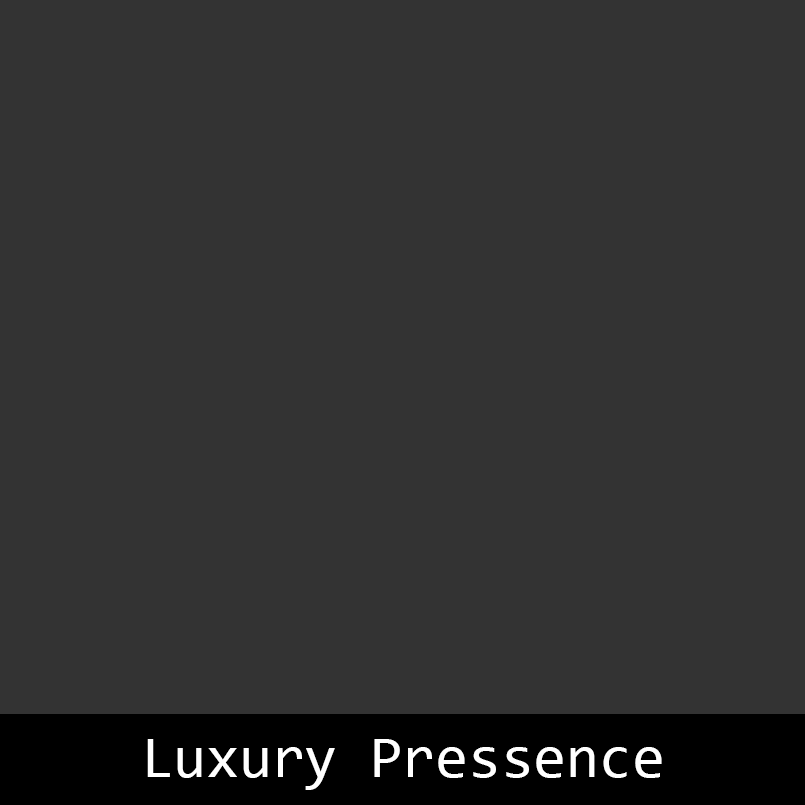
<style>
.page{position:relative;width:805px;height:805px;background:#333333}
.page>*{position:absolute;margin:0}
.t1{font:59.6px "Consolas";color:#ffffff}
</style>
<div class="page">
<p class="t1" style="left:147px;top:739px;width:515px;height:51px">Luxury Pressence</p>
</div>
